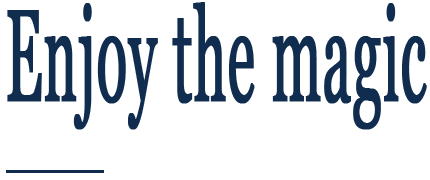
<style>
.page{position:relative;width:430px;height:180px;background:#ffffff}
.page>*{position:absolute;margin:0}
.t1{font:130px "Georgia";color:#102c4f;font-weight:bold;scale:0.43 1}
</style>
<div class="page">
<p class="t1" style="left:7px;top:2px;width:420px;height:128px">Enjoy the magic</p>
</div>
